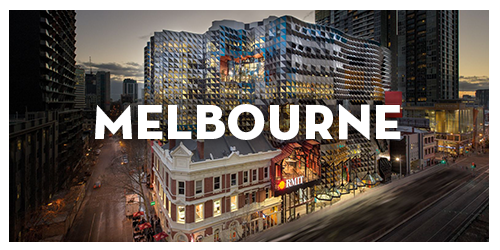
<style>
.page{position:relative;width:500px;height:250px}
.page>*{position:absolute;margin:0}
.t1{font:49.8px "NeutrafaceDisplay-Titling";letter-spacing:0.025em;color:#ffffff}
</style>
<div class="page">
<p class="t1" style="left:95px;top:104px;width:306px;height:36px">MELBOURNE</p>
</div>
